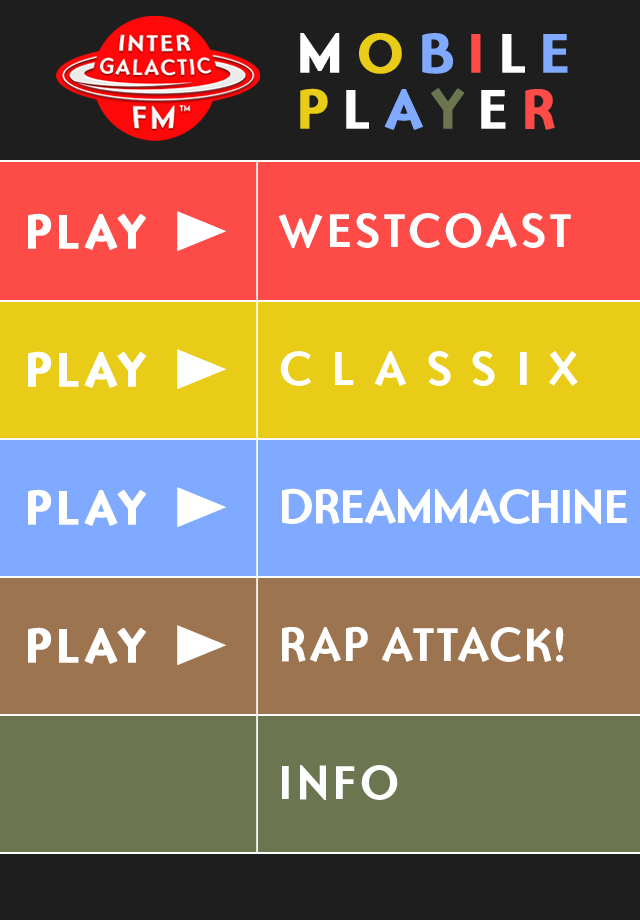
<style>
.page{position:relative;width:640px;height:920px;background:#1e1e1e}
.page>*{position:absolute;margin:0}
.t1{font:56px/56px "OttomatBold";letter-spacing:0.22em;color:#fffdfd;text-transform:uppercase;font-weight:bold}
.t2{font:56px/56px "OttomatBold";letter-spacing:0.22em;color:#e9cc18;text-transform:uppercase;font-weight:bold}
.t3{font:56px/56px "OttomatBold";letter-spacing:0.22em;color:#7faaff;text-transform:uppercase;font-weight:bold}
.t4{font:56px/56px "OttomatBold";letter-spacing:0.22em;color:#fd4b47;text-transform:uppercase;font-weight:bold}
.t5{font:56px/56px "OttomatBold";letter-spacing:0.22em;color:#6b7650;text-transform:uppercase;font-weight:bold}
.t6{font:48px "OttomatBold";letter-spacing:0.05em;color:#ffffff;text-transform:uppercase;font-weight:bold}
.t7{font:48px "OttomatBold";letter-spacing:0.05em;color:#ffffff;text-transform:uppercase}
.t8{font:48px "OttomatBold";letter-spacing:0.38em;color:#ffffff;text-transform:uppercase}
.t9{font:48px "OttomatBold";letter-spacing:-0.06em;color:#ffffff;text-transform:uppercase}
.t10{font:48px "OttomatBold";color:#ffffff;text-transform:uppercase}
</style>
<div class="page">
<p class="t1" style="left:300px;top:33px;width:268px;height:97px">m<span class="t2">o</span><span class="t3">b</span><span class="t4">i</span>l<span class="t3">e<br></span><span class="t2">p</span>l<span class="t3">a</span><span class="t5">y</span>e<span class="t4">r</span></p>
<p class="t6" style="left:28px;top:213px;width:118px;height:37px">play</p>
<p class="t7" style="left:278px;top:213px;width:293px;height:35px">westcoast</p>
<p class="t6" style="left:28px;top:351px;width:118px;height:37px">play</p>
<p class="t8" style="left:280px;top:351px;width:298px;height:35px">classix</p>
<p class="t6" style="left:28px;top:489px;width:118px;height:37px">play</p>
<p class="t9" style="left:282px;top:488px;width:345px;height:36px">dreammachine</p>
<p class="t6" style="left:28px;top:627px;width:118px;height:37px">play</p>
<p class="t10" style="left:282px;top:626px;width:282px;height:36px">rap attack!</p>
<p class="t7" style="left:282px;top:765px;width:116px;height:35px">info</p>
</div>
